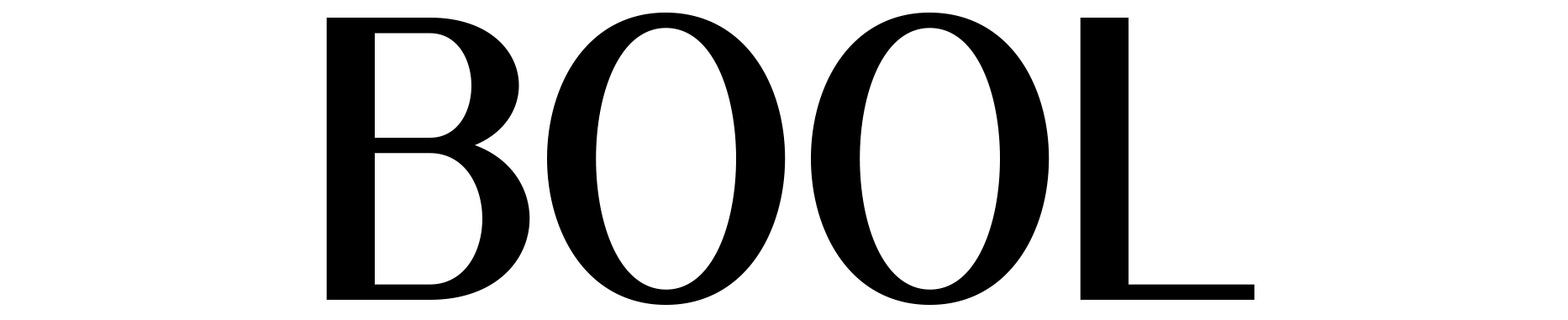
<style>
.page{position:relative;width:1568px;height:320px;background:#ffffff}
.page>*{position:absolute;margin:0}
.t1{font:400.2px "Cranio-Regular";color:#000000}
</style>
<div class="page">
<p class="t1" style="left:326px;top:13px;width:929px;height:292px">BOOL</p>
</div>
